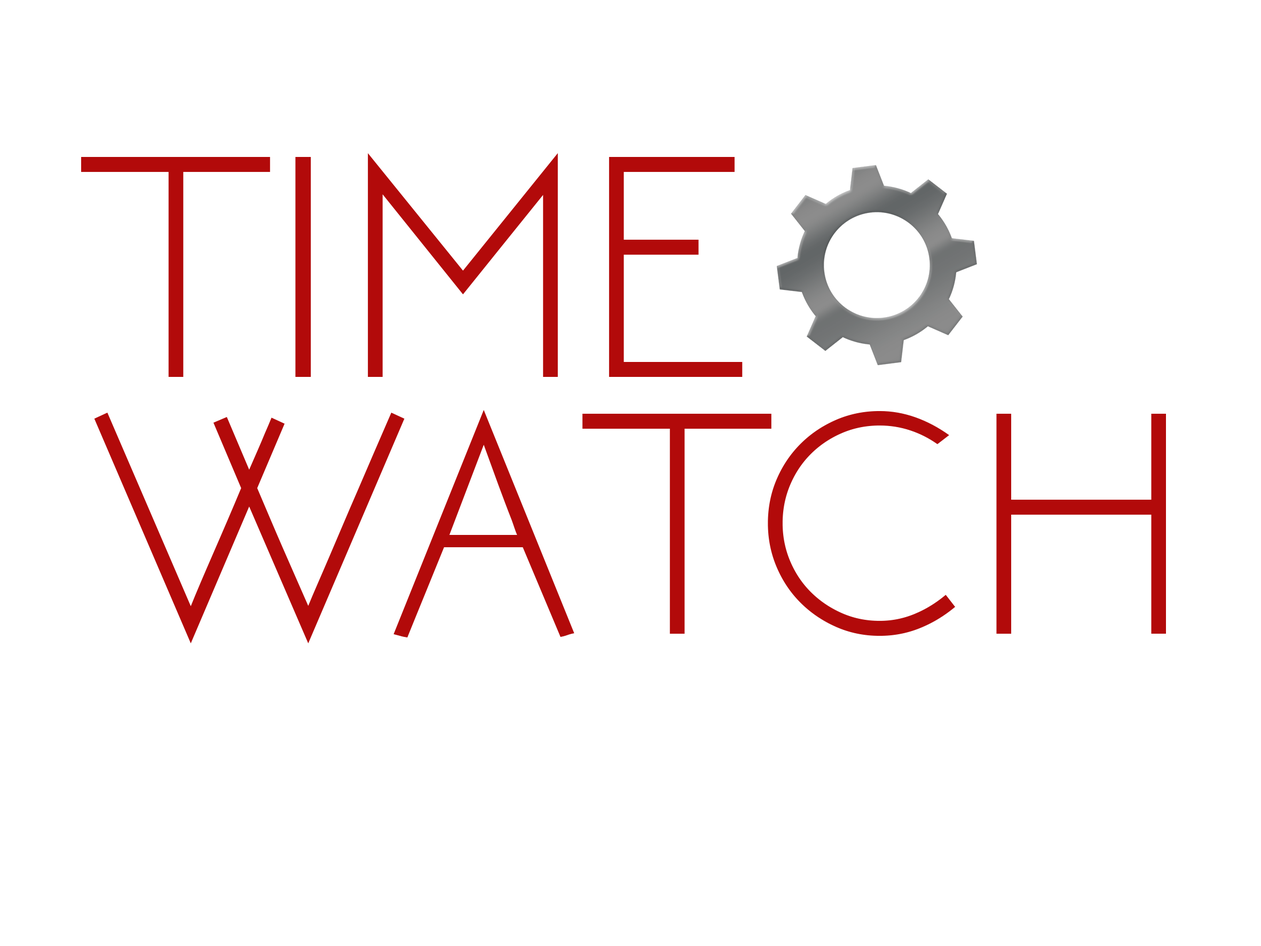
<style>
.page{position:relative;width:1261px;height:946px;background:#ffffff}
.page>*{position:absolute;margin:0}
.t1{font:333.6px "NEOTERIC";color:#b20a0a}
</style>
<div class="page">
<p class="t1" style="left:81px;top:153px;width:661px;height:224px">TIME</p>
<p class="t1" style="left:94px;top:410px;width:1072px;height:233px">WATCH</p>
</div>
